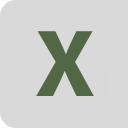
<style>
.page{position:relative;width:128px;height:128px;background:#d9d9d9}
.page>*{position:absolute;margin:0}
.t1{font:126px "FrutigerNeueLTPro-CnBold";color:#526845}
</style>
<div class="page">
<p class="t1" style="left:36px;top:31px;width:58px;height:65px">x</p>
</div>
